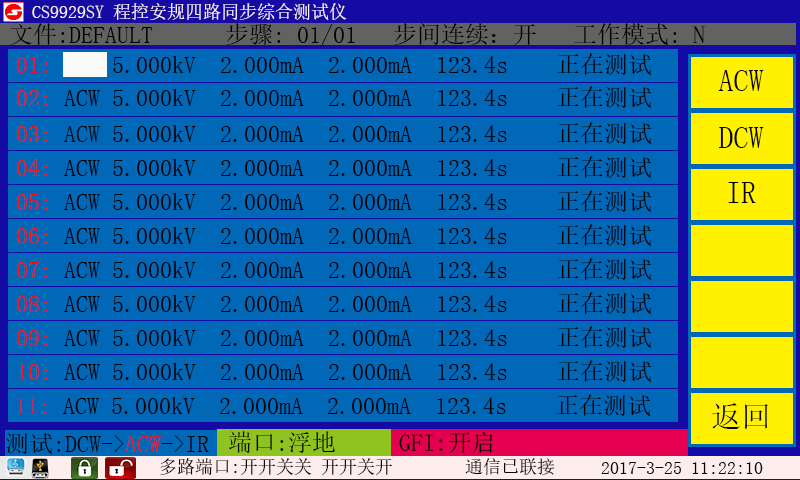
<style>
.page{position:relative;width:800px;height:480px;background:#0068b7}
.page>*{position:absolute;margin:0}
.t1{font:18px "SimSun";color:#f9ecec}
.t2{font:24px "SimSun";color:#000000}
.t3{font:24px "SimSun";color:#f1072d}
.t4{font:30px "SimSun";color:#000000}
.t5{font:24px "SimSun";color:#f30c2d}
.t6{font:24px "SimSun";color:#fd0707}
.t7{font:24px "SimSun";color:#0b0808}
.t8{font:24px "SimSun";color:#f60729}
.t9{font:24px "SimSun";color:#f30a0f}
.t10{font:23.7px "SimSun";color:#000000}
.t11{font:18px "SimSun";color:#080808}
</style>
<div class="page">
<p class="t1" style="left:32px;top:3px;width:315px;height:17px">CS9929SY 程控安规四路同步综合测试仪</p>
<p class="t2" style="left:10px;top:23px;width:695px;height:22px">文件:DEFAULT  步骤: 01/01   步间连续：开   工作模式: N</p>
<p class="t2" style="left:17px;top:53px;width:634px;height:22px"><span class="t3"> 01:</span> ACW 5.000kV  2.000mA  2.000mA  123.4s    正在测试工</p>
<p class="t4" style="left:718px;top:70px;width:46px;height:21px">ACW</p>
<p class="t2" style="left:17px;top:86px;width:634px;height:22px"><span class="t5"> 02:</span> ACW 5.000kV  2.000mA  2.000mA  123.4s    正在测试工</p>
<p class="t2" style="left:17px;top:122px;width:634px;height:22px"><span class="t6">03: </span><span class="t7">ACW </span>5.000kV  2.000mA  2.000mA  123.4s    正在测试工</p>
<p class="t4" style="left:719px;top:127px;width:45px;height:21px">DCW</p>
<p class="t2" style="left:17px;top:156px;width:634px;height:22px"><span class="t6">04:</span> ACW 5.000kV  2.000mA  2.000mA  123.4s    正在测试工</p>
<p class="t4" style="left:728px;top:182px;width:28px;height:21px">IR</p>
<p class="t2" style="left:17px;top:190px;width:634px;height:22px"><span class="t6">05:</span> ACW 5.000kV  2.000mA  2.000mA  123.4s    正在测试工</p>
<p class="t2" style="left:17px;top:224px;width:634px;height:22px"><span class="t6">06:</span> ACW 5.000kV  2.000mA  2.000mA  123.4s    正在测试工</p>
<p class="t2" style="left:17px;top:258px;width:634px;height:22px"><span class="t6">07:</span> ACW 5.000kV  2.000mA  2.000mA  123.4s    正在测试工</p>
<p class="t2" style="left:17px;top:292px;width:634px;height:22px"><span class="t6"> 08:</span> ACW 5.000kV  2.000mA  2.000mA  123.4s    正在测试工</p>
<p class="t2" style="left:17px;top:326px;width:634px;height:22px"><span class="t6">09:</span> ACW 5.000kV  2.000mA  2.000mA  123.4s    正在测试工</p>
<p class="t2" style="left:18px;top:360px;width:633px;height:22px"><span class="t6">10:</span> ACW 5.000kV  2.000mA  2.000mA  123.4s    正在测试工</p>
<p class="t2" style="left:17px;top:394px;width:633px;height:22px"><span class="t8">11:</span> ACW 5.000kV  2.000mA  2.000mA  123.4s    正在测试工</p>
<p class="t4" style="left:712px;top:403px;width:56px;height:26px">返回</p>
<p class="t2" style="left:6px;top:433px;width:203px;height:21px">测试:DCW-&gt;<span class="t9">ACW</span>-&gt;IR</p>
<p class="t2" style="left:229px;top:431px;width:106px;height:22px">端口:浮地</p>
<p class="t10" style="left:399px;top:431px;width:94px;height:23px">GFI:开启</p>
<p class="t11" style="left:160px;top:458px;width:233px;height:17px">多路端口:开开关关 开开关开</p>
<p class="t11" style="left:465px;top:458px;width:90px;height:17px">通信已联接</p>
<p class="t11" style="left:601px;top:462px;width:162px;height:12px">2017-3-25 11:22:10</p>
</div>
